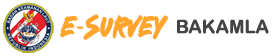
<style>
.page{position:relative;width:280px;height:56px;background:#ffffff}
.page>*{position:absolute;margin:0}
.t1{font:28.9px "Antihero";color:#ffa42c;scale:0.74 1}
.t2{font:18.7px "ArialRoundedMTBold";color:#434343}
</style>
<div class="page">
<p class="t1" style="left:59px;top:14px;width:109px;height:26px">E-SURVEY</p>
<p class="t2" style="left:177px;top:19px;width:92px;height:15px">BAKAMLA</p>
</div>
